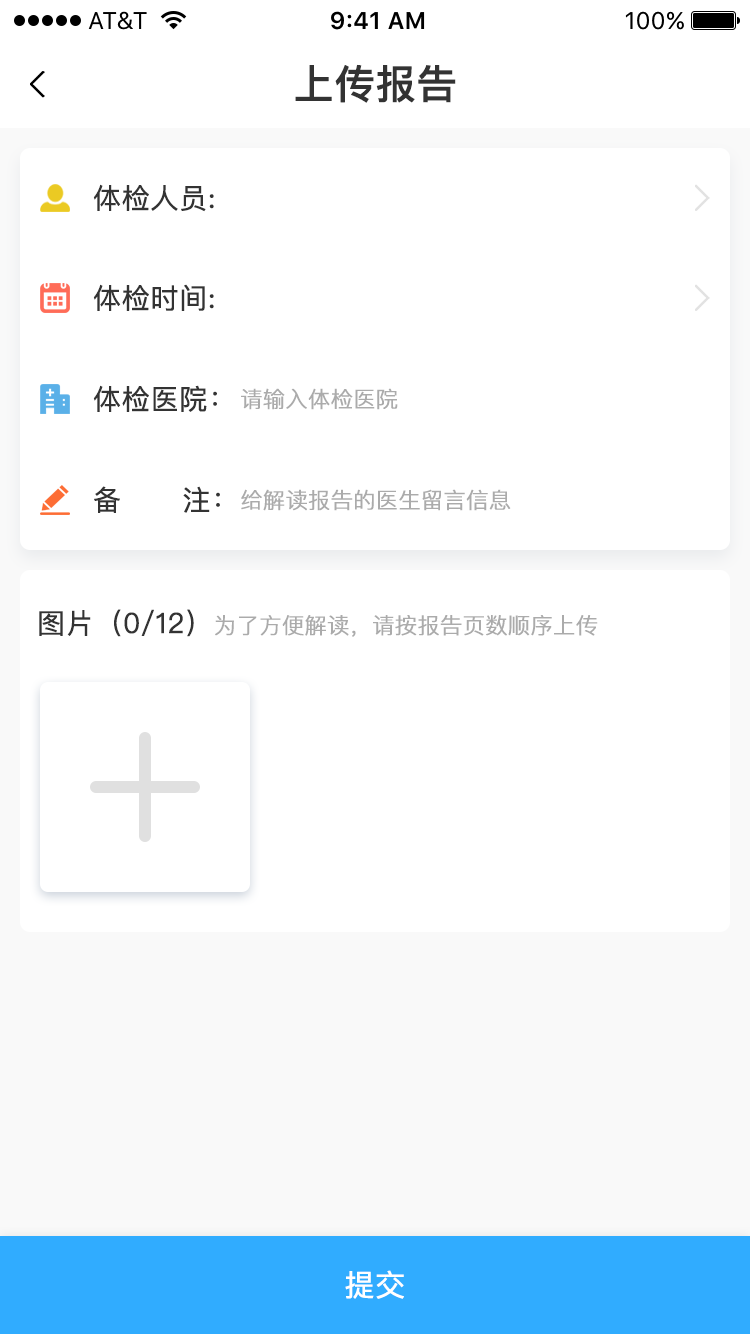
<style>
.page{position:relative;width:750px;height:1334px;background:#ffffff}
.page>*{position:absolute;margin:0}
.t1{font:40px "PingFangSC-Medium";color:#333333;font-weight:bold}
.t2{font:28px "PingFangSC-Regular";color:#333333;font-weight:bold}
.t3{font:22px "PingFangSC-Light";color:#ababab;font-weight:bold}
.t4{font:30px "PingFangSC-Regular";color:#ffffff;font-weight:bold}
</style>
<div class="page">
<p class="t1" style="left:295px;top:64px;width:161px;height:39px">上传报告</p>
<p class="t2" style="left:93px;top:184px;width:121px;height:28px">体检人员:</p>
<p class="t2" style="left:93px;top:284px;width:121px;height:27px">体检时间:</p>
<p class="t2" style="left:93px;top:385px;width:124px;height:27px">体检医院：</p>
<p class="t3" style="left:241px;top:388px;width:157px;height:22px">请输入体检医院</p>
<p class="t2" style="left:94px;top:486px;width:126px;height:27px">备      注：</p>
<p class="t3" style="left:241px;top:489px;width:270px;height:22px">给解读报告的医生留言信息</p>
<p class="t3" style="left:39px;top:609px;width:559px;height:28px"><span class="t2">图片（0/12）</span>为了方便解读，请按报告页数顺序上传</p>
<p class="t4" style="left:345px;top:1270px;width:59px;height:29px">提交</p>
</div>
